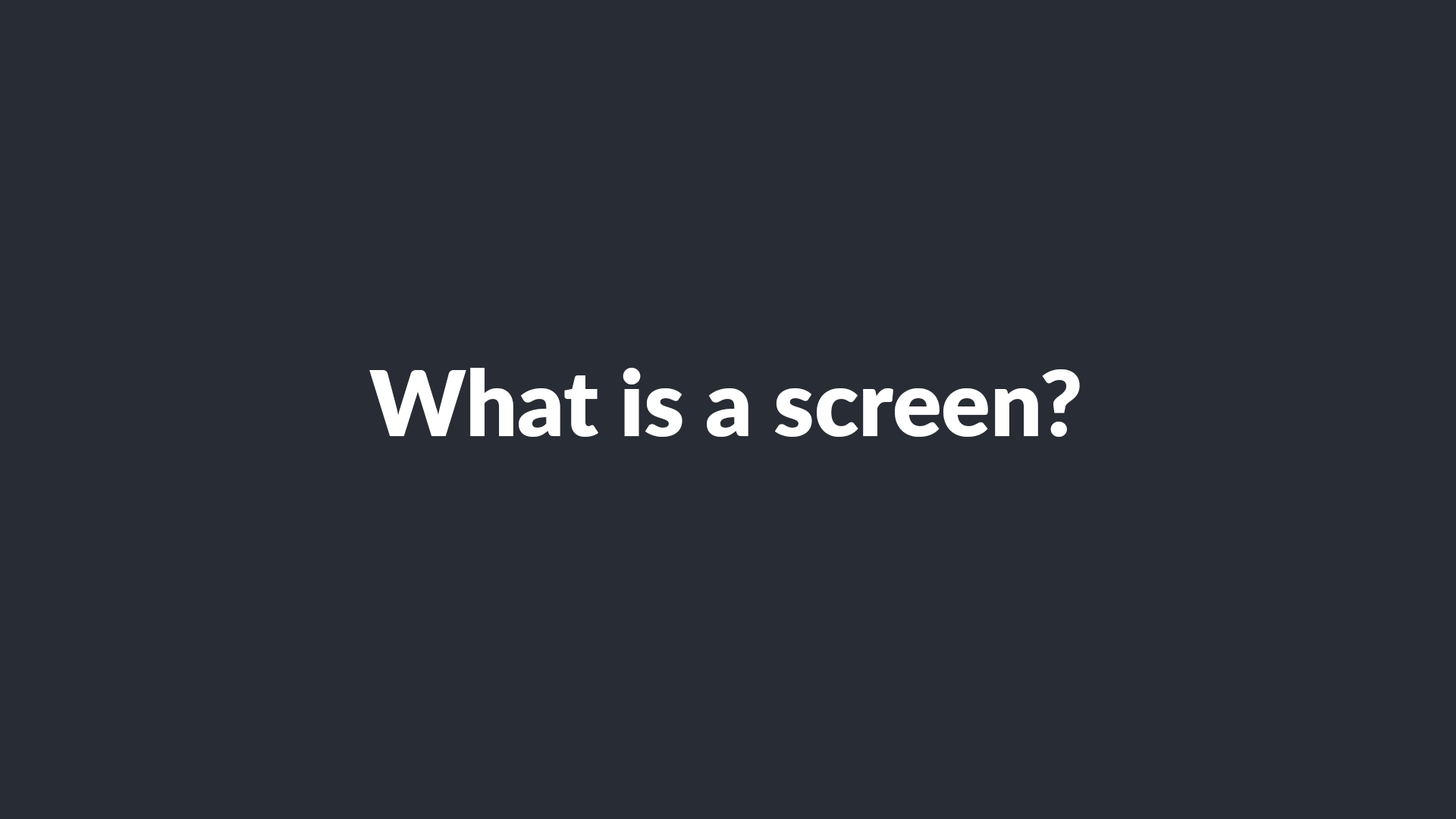
<style>
.page{position:relative;width:1456px;height:819px;background:#282c35}
.page>*{position:absolute;margin:0}
.t1{font:91px "Lato-ExtraBold";color:#ffffff}
</style>
<div class="page">
<p class="t1" style="left:369px;top:368px;width:711px;height:69px">What is a screen?</p>
</div>
